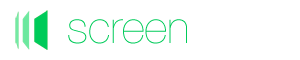
<style>
.page{position:relative;width:300px;height:60px;background:#ffffff}
.page>*{position:absolute;margin:0}
.t1{font:45px "HelveticaNeueLTCom-UltLt";color:#00cb59}
.t2{font:45px "HelveticaNeue";color:#ffffff}
</style>
<div class="page">
<p class="t1" style="left:68px;top:10px;width:205px;height:43px">screen<span class="t2">play</span></p>
</div>
